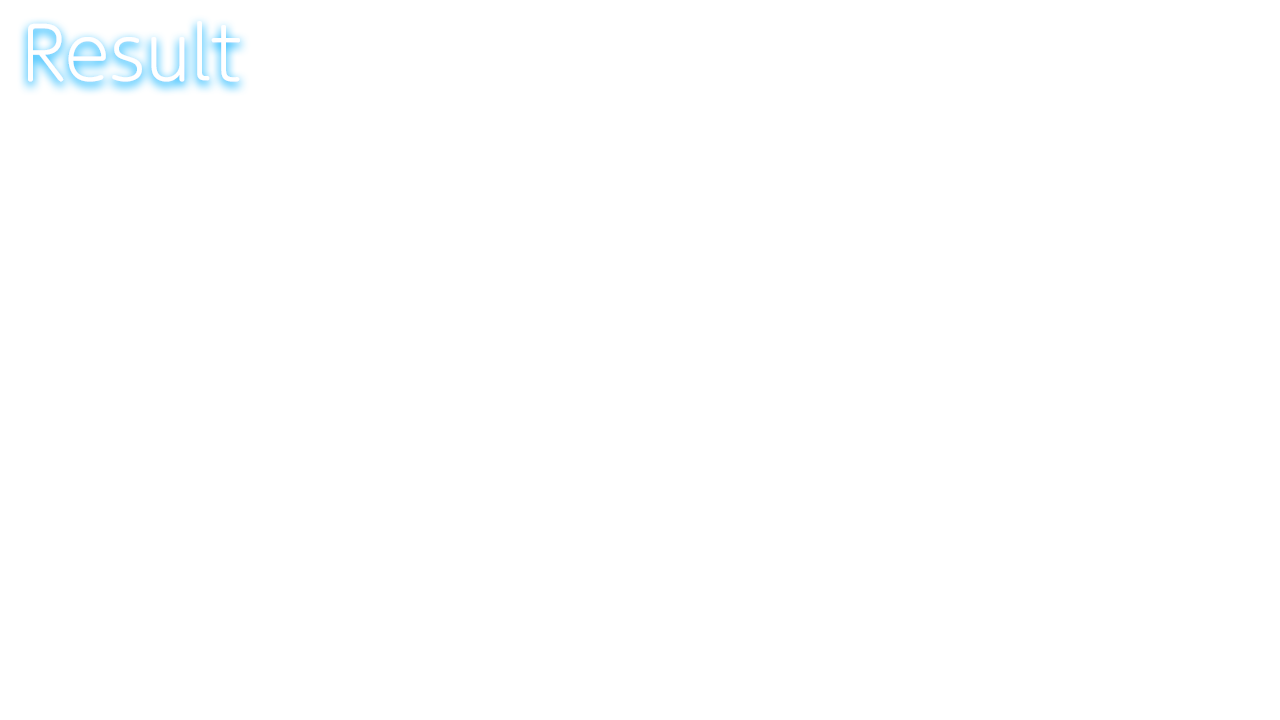
<style>
.page{position:relative;width:1280px;height:720px;background:#ffffff}
.page>*{position:absolute;margin:0}
.t1{font:72px "UDShinMGoPr6N-Light";color:#ffffff}
</style>
<div class="page">
<p class="t1" style="left:28px;top:21px;width:212px;height:61px">Result</p>
</div>
